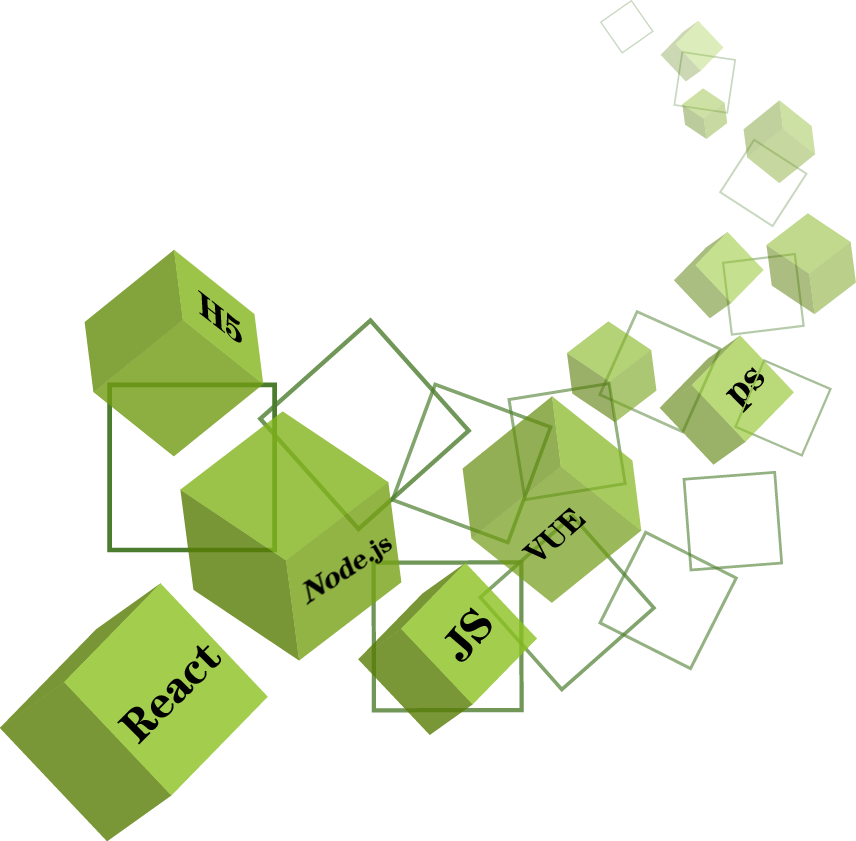
<style>
.page{position:relative;width:856px;height:841px;background:#ffffff}
.page>*{position:absolute;margin:0}
.t1{font:34.3px "Jcusong";letter-spacing:-0.02em;color:#000000;scale:1.25 1}
.t2{font:40.9px "Jcusong";color:#000000;scale:0.93 1}
.t3{font:32.3px "Jcusong";color:#000000}
.t4{font:45.1px "Jcusong";letter-spacing:-0.02em;color:#000000}
</style>
<div class="page">
<p class="t1" style="left:198px;top:290px;width:44px;height:53px;rotate:38deg">H5</p>
<p class="t2" style="left:725px;top:367px;width:39px;height:46px;rotate:-45deg">ps</p>
<p class="t3" style="left:521px;top:507px;width:66px;height:53px;rotate:-42deg">VUE</p>
<p class="t4" style="left:444px;top:607px;width:48px;height:55px;rotate:-49deg">JS</p>
<p class="t4" style="left:117px;top:645px;width:104px;height:100px;rotate:-45deg">React</p>
</div>
